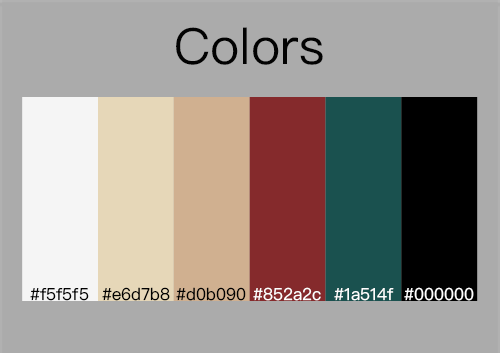
<style>
.page{position:relative;width:500px;height:353px;background:#ababab}
.page>*{position:absolute;margin:0}
.t1{font:50px "PingFangSC-Regular";color:#020202}
.t2{font:16.7px "PingFangSC-Regular";color:#020202}
.t3{font:16.7px "PingFangSC-Regular";color:#000000}
.t4{font:16.7px "PingFangSC-Regular";color:#010101}
.t5{font:16.7px "PingFangSC-Regular";color:#ffffff}
</style>
<div class="page">
<p class="t1" style="left:176px;top:27px;width:147px;height:38px">Colors</p>
<p class="t2" style="left:30px;top:288px;width:59px;height:13px">#f5f5f5</p>
<p class="t3" style="left:102px;top:287px;width:68px;height:14px">#e6d7b8</p>
<p class="t4" style="left:176px;top:287px;width:70px;height:14px">#d0b090</p>
<p class="t5" style="left:253px;top:287px;width:68px;height:14px">#852a2c</p>
<p class="t5" style="left:334px;top:288px;width:60px;height:13px">#1a514f</p>
<p class="t5" style="left:404px;top:287px;width:70px;height:14px">#000000</p>
</div>
